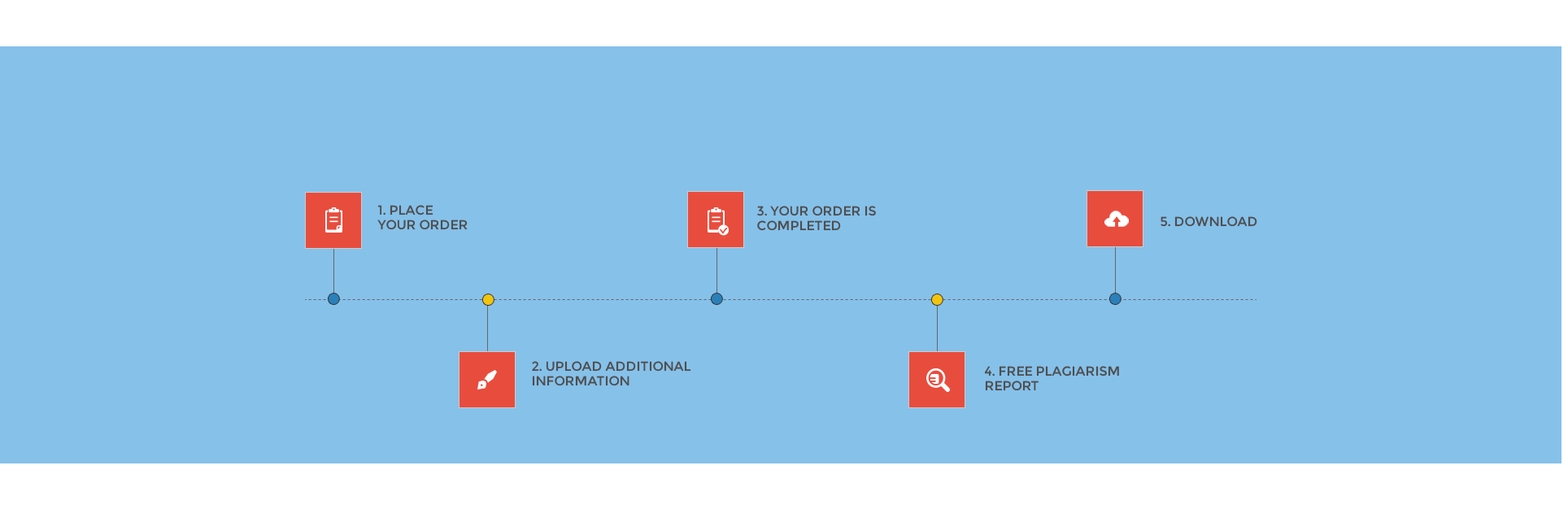
<style>
.page{position:relative;width:1568px;height:509px;background:#86c1ea}
.page>*{position:absolute;margin:0}
.t1{font:13px/14.6px "Montserrat-Regular";color:#4e4e4e;text-transform:uppercase}
.t2{font:13px "Montserrat-Regular";color:#4e4e4e;text-transform:uppercase}
</style>
<div class="page">
<p class="t1" style="left:377px;top:205px;width:91px;height:25px">1. Place Your Order</p>
<p class="t1" style="left:757px;top:206px;width:119px;height:25px">3. Your Order is Completed</p>
<p class="t2" style="left:1161px;top:216px;width:96px;height:11px">5. Download</p>
<p class="t1" style="left:532px;top:361px;width:159px;height:25px">2. Upload Additional Information</p>
<p class="t1" style="left:984px;top:366px;width:135px;height:25px">4. Free plagiarism report</p>
</div>
